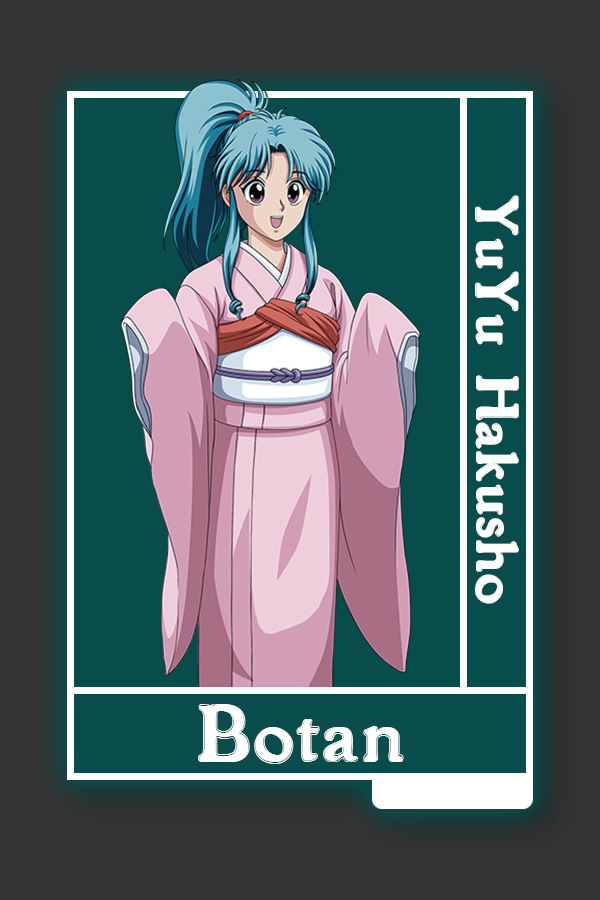
<style>
.page{position:relative;width:600px;height:900px;background:#084d4c}
.page>*{position:absolute;margin:0}
.t1{font:55.2px "GranthamOutline";color:#ffffff}
.t2{font:75px "GranthamOutline";color:#ffffff}
</style>
<div class="page">
<p class="t1" style="left:475px;top:195px;width:44px;height:409px;rotate:90deg">YuYu Hakusho</p>
<p class="t2" style="left:198px;top:704px;width:206px;height:60px">Botan</p>
</div>
